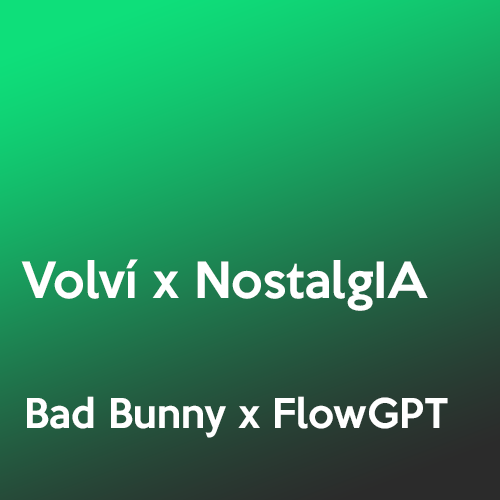
<style>
.page{position:relative;width:500px;height:500px}
.page>*{position:absolute;margin:0}
.t1{font:45.8px "KeepCalm-Medium";color:#ffffff}
.t2{font:37.5px "KeepCalm-Medium";color:#ffffff}
</style>
<div class="page">
<p class="t1" style="left:21px;top:259px;width:407px;height:52px">Volví x NostalgIA</p>
<p class="t2" style="left:27px;top:396px;width:421px;height:42px">Bad Bunny x FlowGPT</p>
</div>
